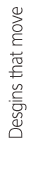
<style>
.page{position:relative;width:34px;height:180px;background:#ffffff}
.page>*{position:absolute;margin:0}
.t1{font:20px "IntervalSansPro-LightCond";color:#393535}
</style>
<div class="page">
<p class="t1" style="left:8px;top:7px;width:19px;height:131px;rotate:-90deg">Desgins that move</p>
</div>
